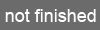
<style>
.page{position:relative;width:100px;height:30px;background:#6b6b6b}
.page>*{position:absolute;margin:0}
.t1{font:18px "ArialMT";color:#ffffff}
</style>
<div class="page">
<p class="t1" style="left:5px;top:9px;width:91px;height:13px">not finished</p>
</div>
